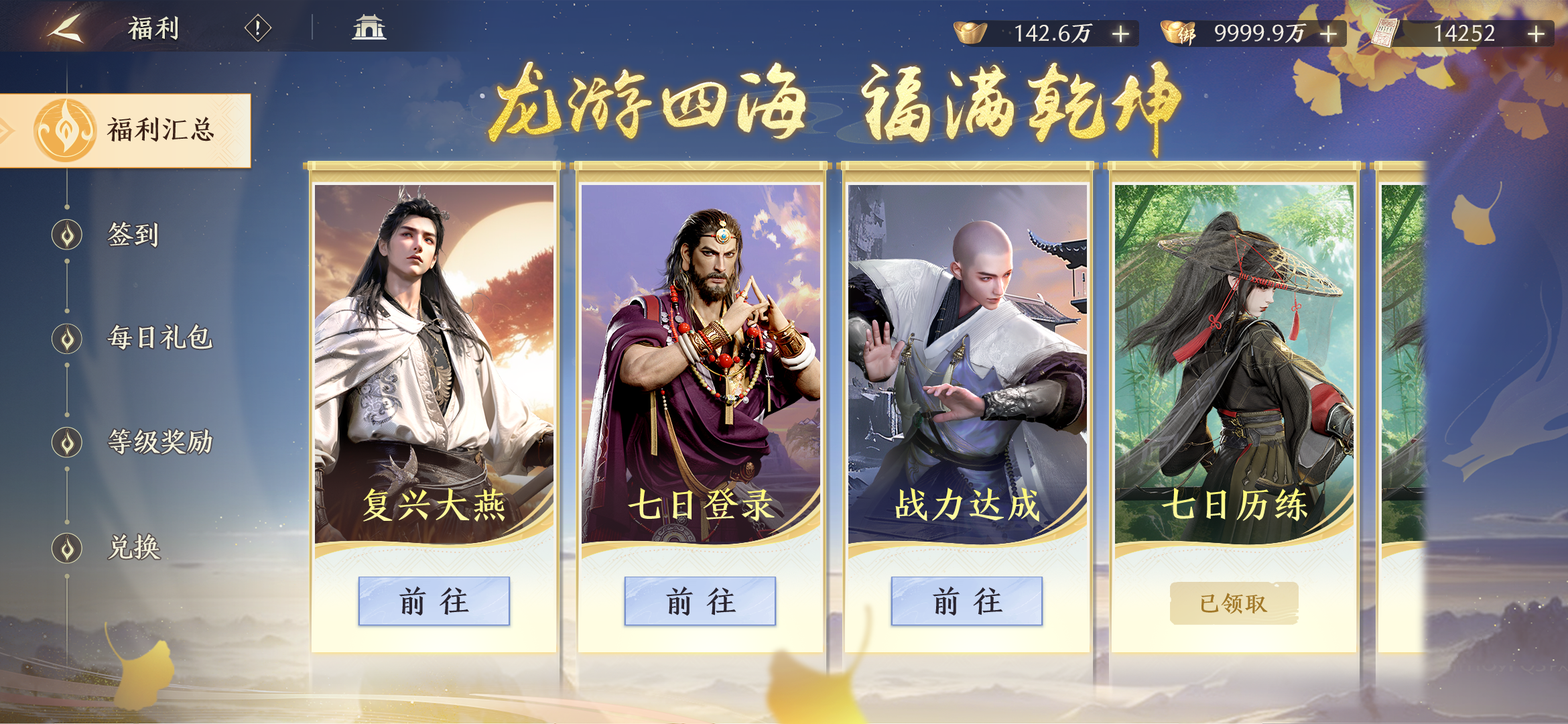
<style>
.page{position:relative;width:1568px;height:724px}
.page>*{position:absolute;margin:0}
.t1{font:26.8px "HYJinKaiJ";letter-spacing:-0.025em;color:#e7e7cf;font-weight:bold}
.t2{font:28.1px "HYJinKaiJ";letter-spacing:-0.025em;color:#3a2016}
.t3{font:28.1px "HYJinKaiJ";letter-spacing:-0.05em;color:#f3f2db}
.t4{font:37.5px "HYJinKaiJ";color:#fdf890}
.t5{font:37.5px "HYJinKaiJ";color:#fdf88e}
.t6{font:37.5px "HYJinKaiJ";color:#fdf88d}
.t7{font:32.2px "HYJinKaiJ";letter-spacing:0.3em;color:#29242f}
.t8{font:32.2px "AdobeHeitiStd-Regular";letter-spacing:0.3em;color:#29242f}
.t9{font:23.6px "HYJinKaiJ";color:#a17727}
</style>
<div class="page">
<p class="t1" style="left:128px;top:15px;width:50px;height:25px">福利</p>
<p class="t2" style="left:107px;top:117px;width:107px;height:25px">福利汇总</p>
<p class="t3" style="left:107px;top:222px;width:50px;height:25px">签到</p>
<p class="t3" style="left:107px;top:324px;width:105px;height:26px">每日礼包</p>
<p class="t3" style="left:108px;top:429px;width:104px;height:25px">等级奖励</p>
<p class="t4" style="left:363px;top:487px;width:142px;height:35px">复兴大燕</p>
<p class="t5" style="left:628px;top:487px;width:147px;height:34px">七日登录</p>
<p class="t4" style="left:895px;top:487px;width:144px;height:35px">战力达成</p>
<p class="t6" style="left:1161px;top:487px;width:146px;height:34px">七日历练</p>
<p class="t3" style="left:108px;top:533px;width:53px;height:27px">兑换</p>
<p class="t7" style="left:399px;top:586px;width:70px;height:30px"><span class="t8"> </span>前往</p>
<p class="t7" style="left:665px;top:586px;width:71px;height:30px"><span class="t8"> </span>前往</p>
<p class="t7" style="left:932px;top:586px;width:71px;height:30px"><span class="t8"> </span>前往</p>
<p class="t9" style="left:1201px;top:592px;width:67px;height:22px">已领取</p>
</div>
